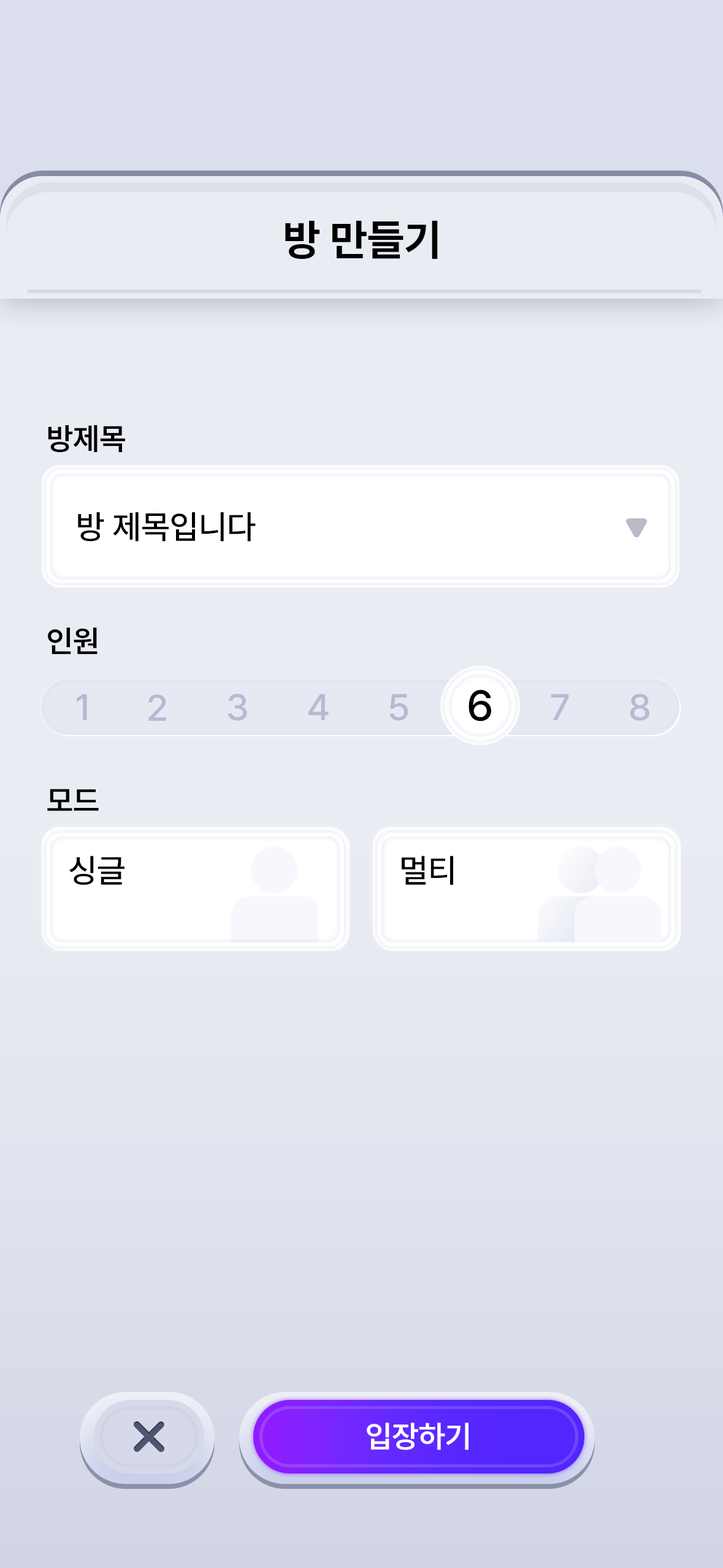
<style>
.page{position:relative;width:723px;height:1568px;background:#eaecf3}
.page>*{position:absolute;margin:0}
.t1{font:42.9px "PretendardVariable-Bold";color:#000000}
.t2{font:30.7px "PretendardVariable-SemiBold";color:#000000}
.t3{font:33.1px "PretendardVariable-Medium";color:#000000}
.t4{font:42.9px "PretendardVariable-Medium";color:#000000}
</style>
<div class="page">
<p class="t1" style="left:285px;top:220px;width:153px;height:39px">방 만들기</p>
<p class="t2" style="left:48px;top:425px;width:77px;height:27px">방제목</p>
<p class="t3" style="left:78px;top:512px;width:178px;height:30px">방 제목입니다</p>
<p class="t2" style="left:48px;top:628px;width:50px;height:27px">인원</p>
<p class="t4" style="left:469px;top:690px;width:22px;height:31px">6</p>
<p class="t2" style="left:47px;top:789px;width:52px;height:22px">모드</p>
<p class="t3" style="left:69px;top:856px;width:56px;height:29px">싱글</p>
<p class="t3" style="left:69px;top:856px;width:56px;height:29px">싱글</p>
<p class="t3" style="left:402px;top:856px;width:51px;height:29px">멀티</p>
<p class="t3" style="left:402px;top:856px;width:51px;height:29px">멀티</p>
</div>
